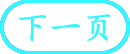
<style>
.page{position:relative;width:130px;height:54px;background:#ffffff}
.page>*{position:absolute;margin:0}
.t1{font:32px "KaiTi";color:#35f7ff;font-weight:bold}
</style>
<div class="page">
<p class="t1" style="left:19px;top:14px;width:92px;height:28px">下一页</p>
</div>
